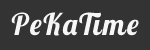
<style>
.page{position:relative;width:150px;height:50px;background:#333333}
.page>*{position:absolute;margin:0}
.t1{font:30px "Lobster-Regular";letter-spacing:0.06em;color:#f6f6f6}
</style>
<div class="page">
<p class="t1" style="left:11px;top:12px;width:128px;height:24px">PeKaTime</p>
</div>
